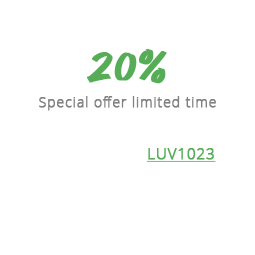
<style>
.page{position:relative;width:255px;height:255px;background:#ffffff}
.page>*{position:absolute;margin:0}
.t1{font:14px/26px "OpenSans-Light";letter-spacing:0.04em;color:#818181;font-weight:bold}
.t2{font:30px/30px "OpenSans-Light";letter-spacing:0.04em;color:#ffffff;font-weight:bold}
.t3{font:41px/30px "GOODBRUSH";letter-spacing:0.04em;color:#57ad57;font-weight:bold}
.t4{font:15px/26px "OpenSans-Light";letter-spacing:0.04em;color:#ffffff;font-weight:bold}
.t5{font:15px/26px "OpenSans-Light";letter-spacing:0.04em;color:#57ad57;font-weight:bold;text-decoration:underline}
.t6{font:15px/33px "OpenSans-Light";letter-spacing:0.04em;color:#ffffff;font-weight:bold}
</style>
<div class="page">
<p class="t1" style="left:21px;top:49px;width:215px;height:144px;text-align:center"><span class="t2">GET </span><span class="t3">20% </span><span class="t2">OFF<br></span>Special offer limited time<br><br><span class="t4">OFFER CODE: </span><span class="t5">LUV1023<br></span><span class="t6">Offer Ends 31St October</span></p>
</div>
